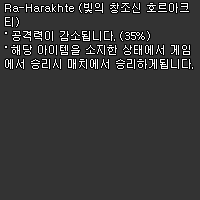
<style>
.page{position:relative;width:200px;height:200px;background:#333333}
.page>*{position:absolute;margin:0}
.t1{font:11px/14px "Dotum";color:#ffffff}
</style>
<div class="page">
<p class="t1" style="left:5px;top:3px;width:188px;height:66px">Ra-Harakhte (빛의 창조신 호르아크<br>티)<br>˚ 공격력이 감소됩니다. (35%)<br>˚ 해당 아이템을 소지한 상태에서 게임<br>에서 승리시 매치에서 승리하게됩니다.</p>
</div>
